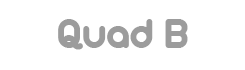
<style>
.page{position:relative;width:245px;height:70px;background:#ffffff}
.page>*{position:absolute;margin:0}
.t1{font:45px "Arista2.0";color:#9c9c9c}
</style>
<div class="page">
<p class="t1" style="left:58px;top:19px;width:130px;height:31px">Quad B</p>
</div>
